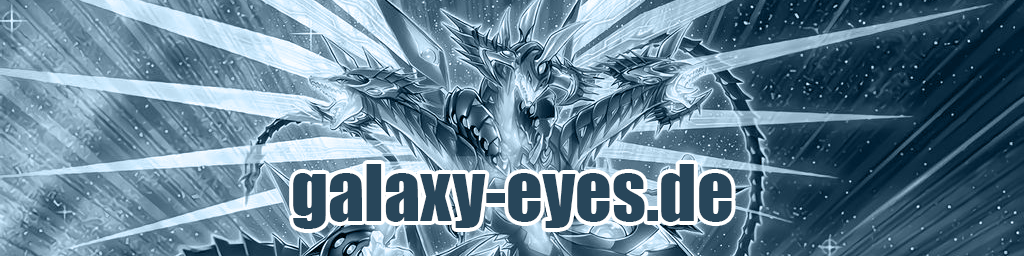
<style>
.page{position:relative;width:1024px;height:256px}
.page>*{position:absolute;margin:0}
.t1{font:72px "Impact";color:#28465a}
</style>
<div class="page">
<p class="t1" style="left:293px;top:164px;width:439px;height:65px">galaxy-eyes.de</p>
</div>
